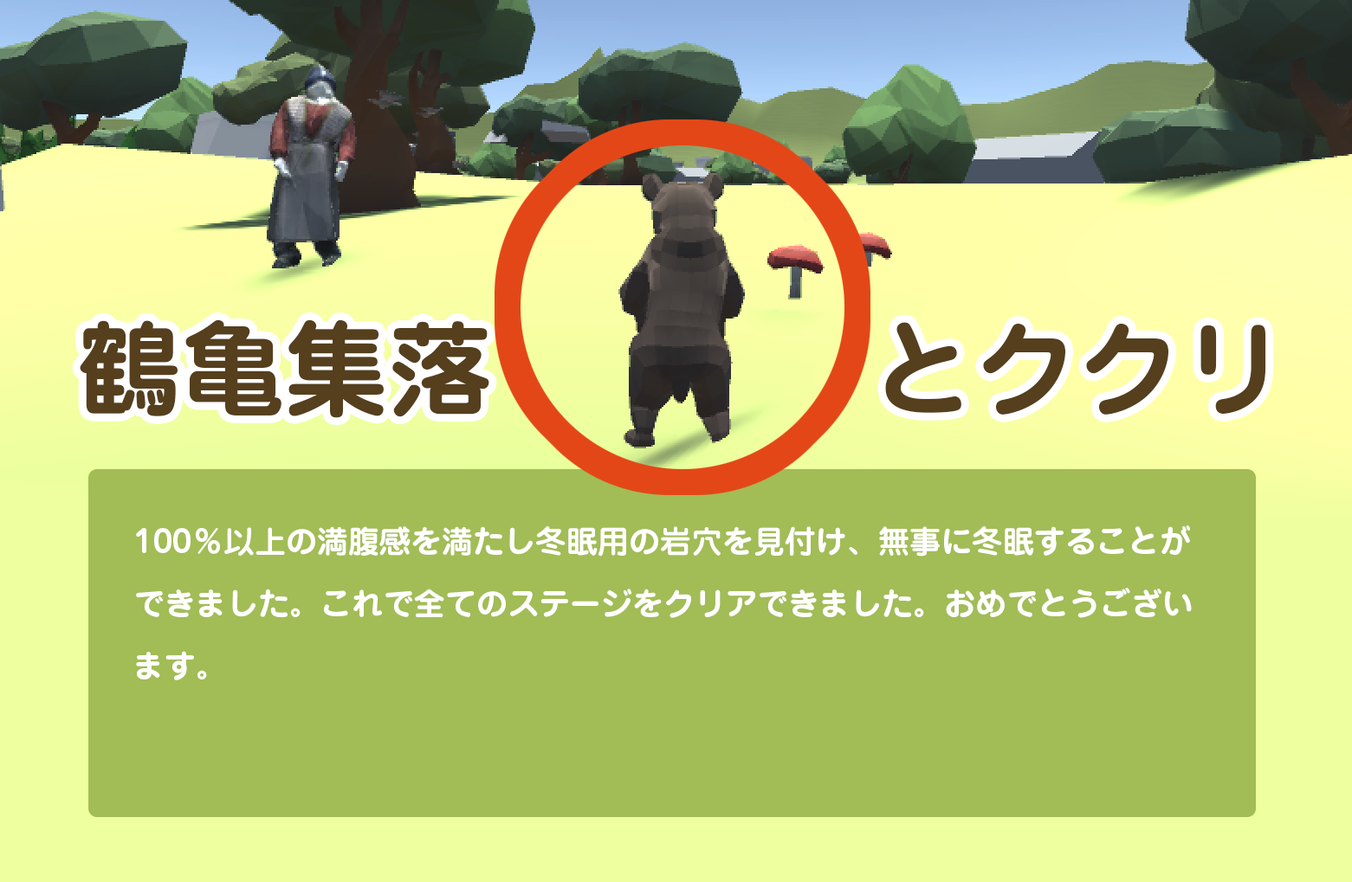
<style>
.page{position:relative;width:1352px;height:882px;background:#a2bc56}
.page>*{position:absolute;margin:0}
.t1{font:103.4px "Jun501Pro-Bold";color:#553f1d}
.t2{font:31.2px/62.3px "Jun501Pro-Bold";color:#ffffff}
</style>
<div class="page">
<p class="t1" style="left:80px;top:319px;width:1186px;height:99px">鶴亀集落     　　とククリ</p>
<p class="t2" style="left:136px;top:526px;width:1055px;height:155px">100％以上の満腹感を満たし冬眠用の岩穴を見付け、無事に冬眠することができました。これで全てのステージをクリアできました。おめでとうございます。</p>
</div>
